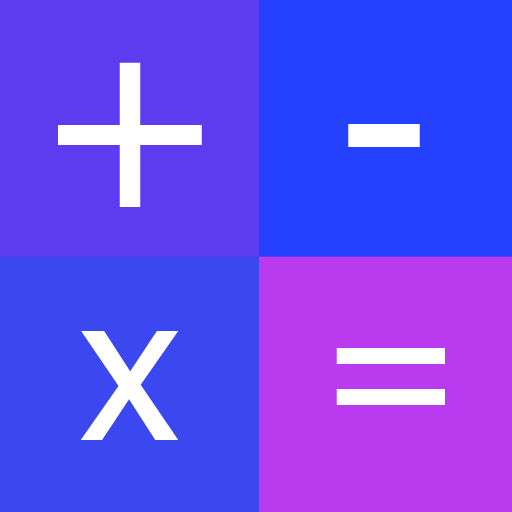
<style>
.page{position:relative;width:512px;height:512px;background:#2640ff}
.page>*{position:absolute;margin:0}
.t1{font:250px "Tahoma";color:#ffffff}
.t2{font:259px "Tahoma";color:#ffffff}
.t3{font:200px "Tahoma";color:#ffffff}
</style>
<div class="page">
<p class="t1" style="left:58px;top:62px;width:144px;height:145px">+</p>
<p class="t2" style="left:348px;top:124px;width:72px;height:23px">-</p>
<p class="t3" style="left:80px;top:331px;width:99px;height:109px">x</p>
<p class="t3" style="left:336px;top:348px;width:109px;height:57px">=</p>
</div>
